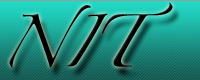
<style>
.page{position:relative;width:200px;height:80px}
.page>*{position:absolute;margin:0}
.t1{font:47px "Zapfino";letter-spacing:-0.015em;color:#000000}
</style>
<div class="page">
<p class="t1" style="left:9px;top:2px;width:164px;height:66px">NIT</p>
</div>
